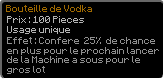
<style>
.page{position:relative;width:164px;height:79px;background:#000000}
.page>*{position:absolute;margin:0}
.t1{font:8px "Minecraft";color:#9f6900}
.t2{font:8px "Minecraft";color:#b3b3b3}
.t3{font:8px "Minecraft";color:#8f8f8f}
</style>
<div class="page">
<p class="t1" style="left:6px;top:5px;width:86px;height:7px">Bouteille de Vodka</p>
<p class="t2" style="left:7px;top:16px;width:77px;height:7px">Prix : 100 Pieces</p>
<p class="t2" style="left:7px;top:26px;width:63px;height:8px">Usage unique</p>
<p class="t3" style="left:7px;top:37px;width:152px;height:37px">Effet : Confere  25%  de chance<br>en plus pour le prochain lancer<br>de la Machine a sous pour le <br>gros lot</p>
</div>
